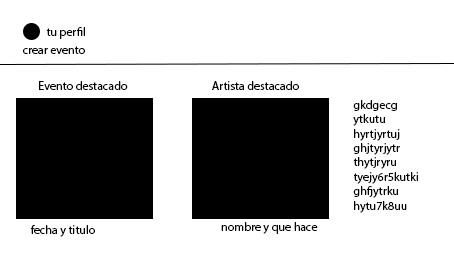
<style>
.page{position:relative;width:454px;height:260px;background:#ffffff}
.page>*{position:absolute;margin:0}
.t1{font:12px "MyriadPro-Regular";color:#000000}
</style>
<div class="page">
<p class="t1" style="left:46px;top:27px;width:39px;height:12px">tu perfil</p>
<p class="t1" style="left:23px;top:46px;width:62px;height:8px">crear evento</p>
<p class="t1" style="left:39px;top:81px;width:89px;height:9px">Evento destacado</p>
<p class="t1" style="left:212px;top:81px;width:87px;height:9px">Artista destacado</p>
<p class="t1" style="left:353px;top:100px;width:65px;height:113px">gkdgecg<br>ytkutu<br>hyrtjyrtuj<br>ghjtyrjytr<br>thytjryru<br>tyejy6r5kutki<br>ghfjytrku<br>hytu7k8uu</p>
<p class="t1" style="left:221px;top:222px;width:97px;height:12px">nombre y que hace</p>
<p class="t1" style="left:31px;top:225px;width:64px;height:12px">fecha y titulo</p>
</div>
